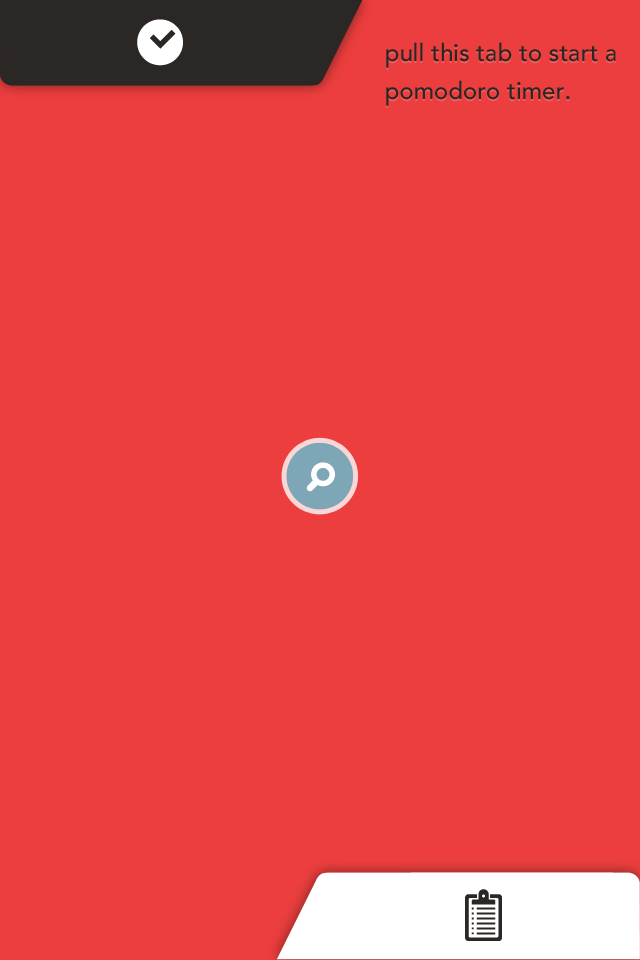
<style>
.page{position:relative;width:640px;height:960px;background:#ec3e3e}
.page>*{position:absolute;margin:0}
.t1{font:24px/38.8px "Avenir-Medium";color:#2b2724}
</style>
<div class="page">
<p class="t1" style="left:386px;top:42px;width:230px;height:64px">pull this tab to start a pomodoro timer.</p>
</div>
